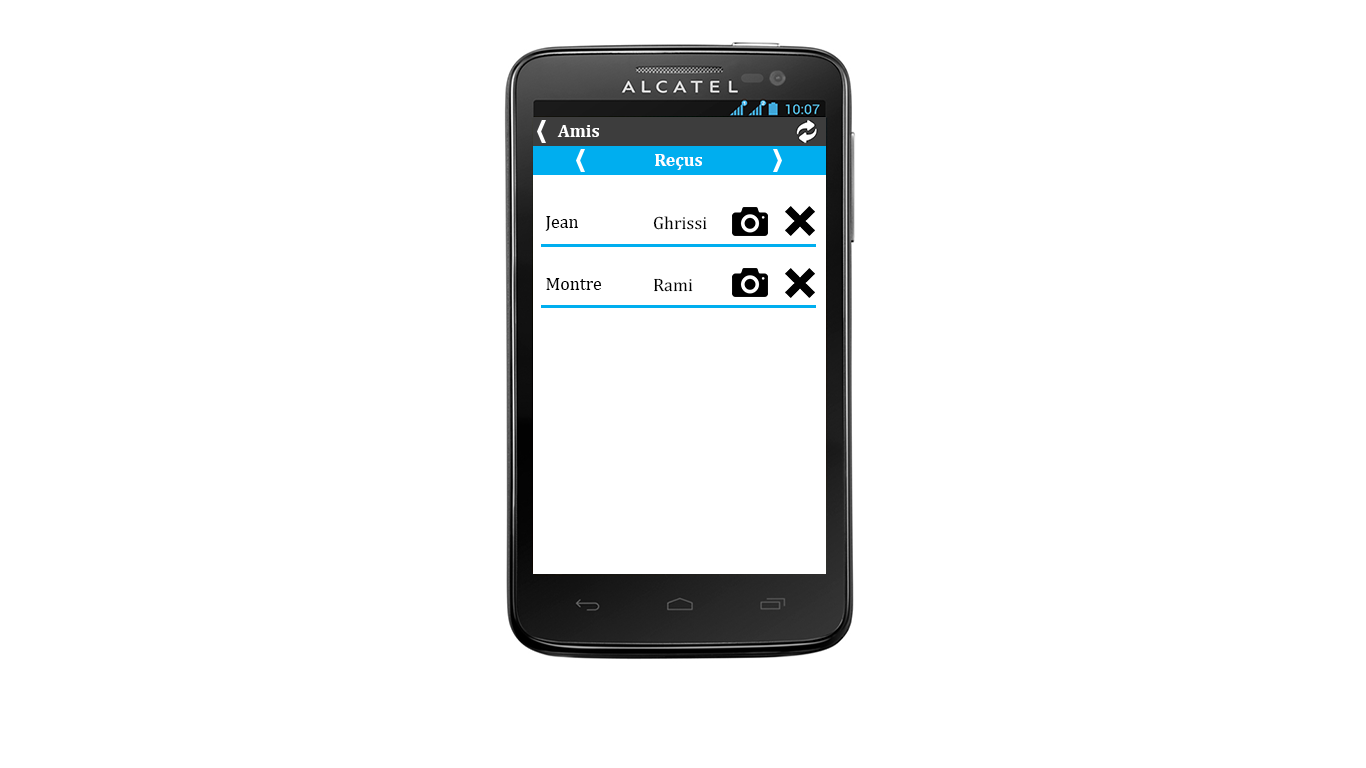
<style>
.page{position:relative;width:1366px;height:768px;background:#ffffff}
.page>*{position:absolute;margin:0}
.t1{font:18px "Cambria-Bold";color:#ffffff}
.t2{font:18px "Cambria";color:#000000}
</style>
<div class="page">
<p class="t1" style="left:557px;top:125px;width:42px;height:12px">Amis</p>
<p class="t1" style="left:655px;top:154px;width:47px;height:16px">Reçus</p>
<p class="t2" style="left:545px;top:216px;width:33px;height:15px">Jean</p>
<p class="t2" style="left:653px;top:216px;width:54px;height:14px">Ghrissi</p>
<p class="t2" style="left:546px;top:278px;width:56px;height:12px">Montre</p>
<p class="t2" style="left:654px;top:278px;width:39px;height:14px">Rami</p>
</div>
